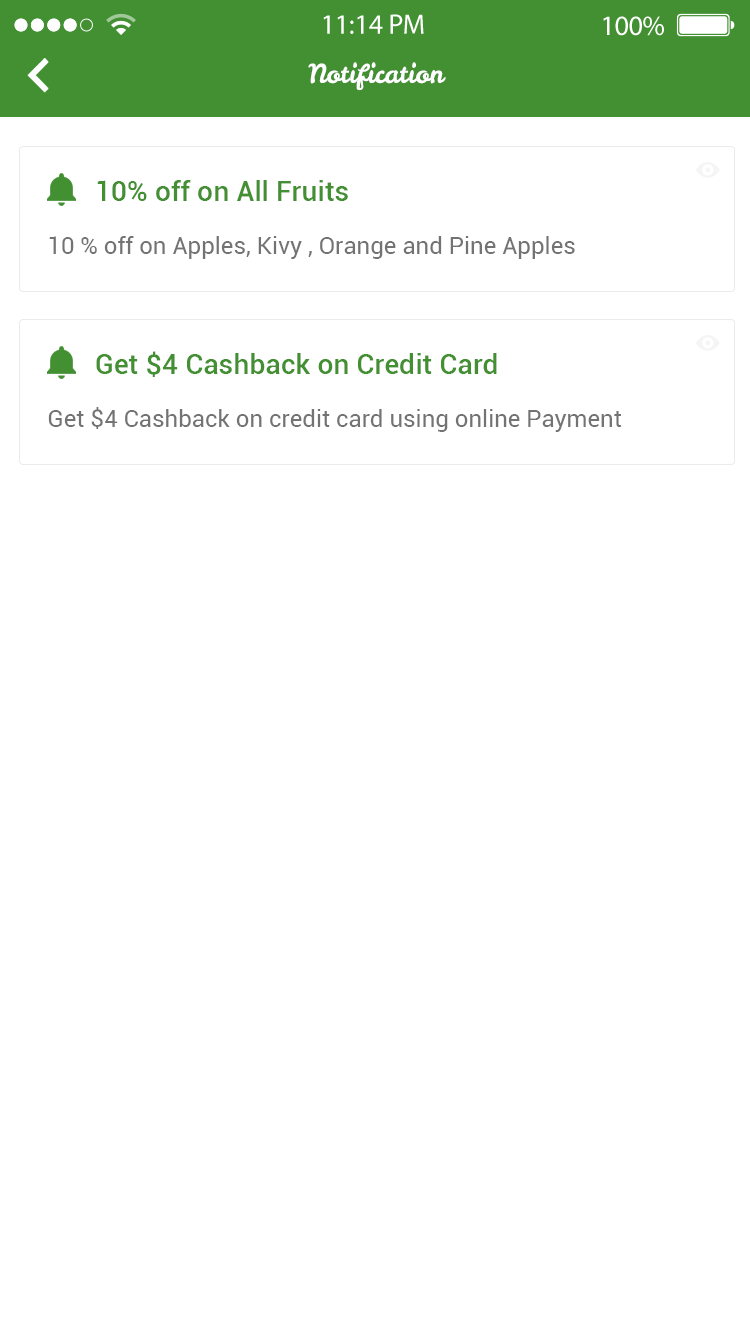
<style>
.page{position:relative;width:750px;height:1334px;background:#ffffff}
.page>*{position:absolute;margin:0}
.t1{font:26px "LeckerliOne-Regular";color:#ffffff}
.t2{font:28.3px "Roboto-Medium";color:#439033}
.t3{font:23.9px "Roboto-Regular";color:#737373}
</style>
<div class="page">
<p class="t1" style="left:308px;top:62px;width:138px;height:29px">Notification</p>
<p class="t2" style="left:97px;top:180px;width:251px;height:21px">10% off on All Fruits</p>
<p class="t3" style="left:49px;top:236px;width:526px;height:23px">10 % off on Apples, Kivy , Orange and Pine Apples</p>
<p class="t2" style="left:96px;top:351px;width:401px;height:26px">Get $4 Cashback on Credit Card</p>
<p class="t3" style="left:48px;top:407px;width:574px;height:25px">Get $4 Cashback on credit card using online Payment</p>
</div>
